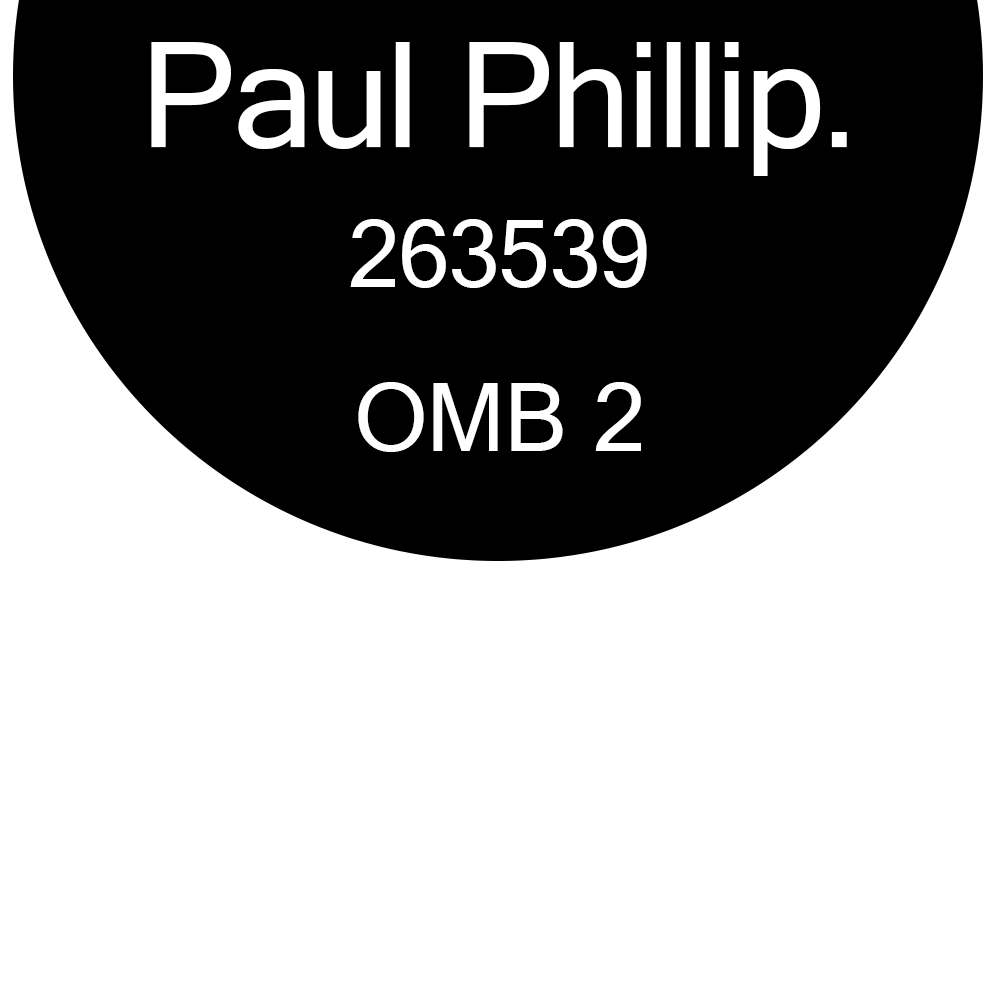
<style>
.page{position:relative;width:1000px;height:1000px;background:#ffffff}
.page>*{position:absolute;margin:0}
.t1{font:145.8px "MicrosoftSansSerif";color:#ffffff}
.t2{font:93.1px "MicrosoftSansSerif";color:#ffffff}
.t3{font:95.4px "MicrosoftSansSerif";color:#ffffff}
</style>
<div class="page">
<p class="t1" style="left:151px;top:42px;width:696px;height:134px">Paul Phillip.</p>
<p class="t2" style="left:350px;top:219px;width:297px;height:69px">263539</p>
<p class="t3" style="left:358px;top:382px;width:283px;height:70px">OMB 2</p>
</div>
